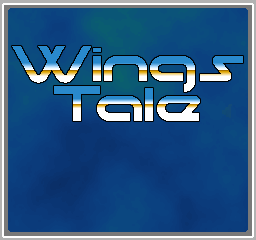
<style>
.page{position:relative;width:256px;height:240px}
.page>*{position:absolute;margin:0}
.t1{font:64px "moonhouse"}
</style>
<div class="page">
<p class="t1" style="left:12px;top:46px;width:231px;height:46px">Wings</p>
<p class="t1" style="left:54px;top:86px;width:146px;height:35px">Tale</p>
</div>
